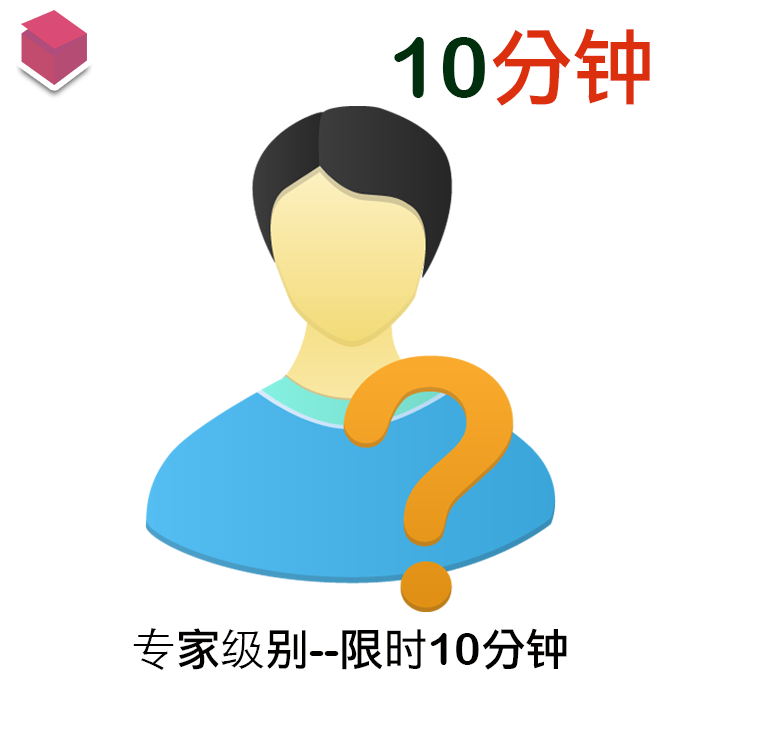
<style>
.page{position:relative;width:768px;height:756px;background:#ffffff}
.page>*{position:absolute;margin:0}
.t1{font:83.8px "ArialRoundedMTBold";color:#002f0d}
.t2{font:83.8px "LiHeiPro";color:#dc2f0d}
.t3{font:44.5px "ArialRoundedMTBold";color:#030100}
.t4{font:44.5px "STHeitiSC-Light";color:#030100}
.t5{font:44.5px "LiHeiPro";color:#030100}
</style>
<div class="page">
<p class="t1" style="left:394px;top:28px;width:256px;height:78px">10<span class="t2">分钟</span></p>
<p class="t3" style="left:133px;top:628px;width:434px;height:42px"><span class="t4">专</span><span class="t5">家</span><span class="t4">级</span><span class="t5">别</span>--<span class="t5">限时</span>10<span class="t5">分钟</span></p>
</div>
